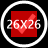
<style>
.page{position:relative;width:48px;height:48px;background:#000000}
.page>*{position:absolute;margin:0}
.t1{font:12px "SegoeWP-Semibold";letter-spacing:0.025em;color:#ffffff;text-transform:uppercase}
</style>
<div class="page">
<p class="t1" style="left:7px;top:19px;width:34px;height:10px">26x26</p>
</div>
